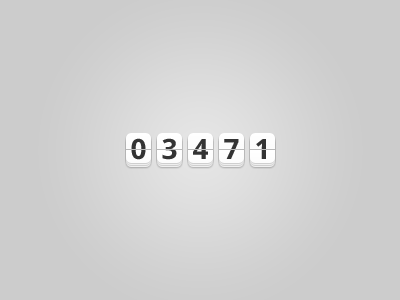
<style>
.page{position:relative;width:400px;height:300px;background:#cccccc}
.page>*{position:absolute;margin:0}
.t1{font:28px "OpenSans-Bold";letter-spacing:0.01em;color:#333333}
</style>
<div class="page">
<p class="t1" style="left:131px;top:138px;width:15px;height:22px">0</p>
<p class="t1" style="left:162px;top:138px;width:15px;height:22px">3</p>
<p class="t1" style="left:193px;top:139px;width:15px;height:20px">4</p>
<p class="t1" style="left:224px;top:139px;width:15px;height:20px">7</p>
<p class="t1" style="left:256px;top:139px;width:10px;height:20px">1</p>
</div>
